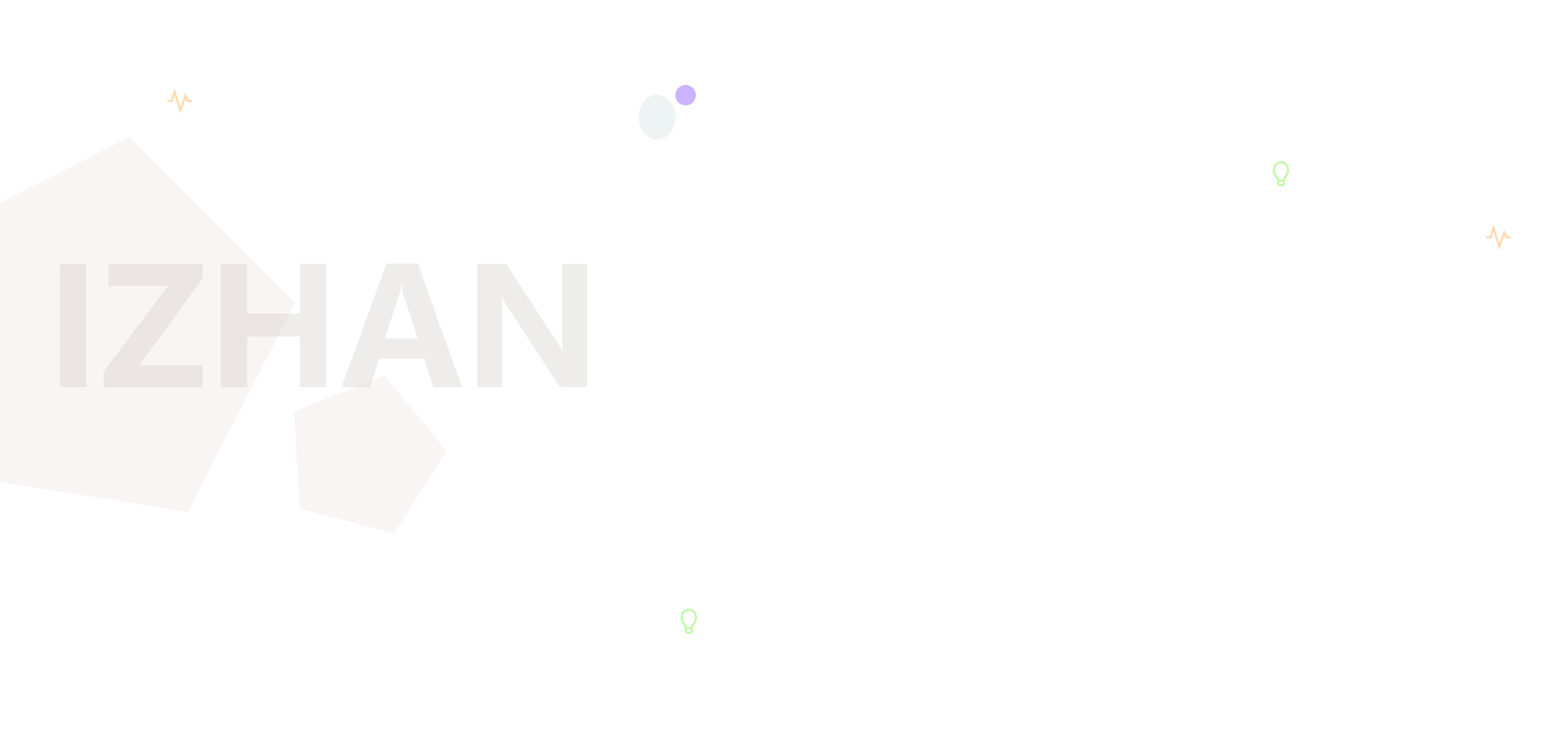
<style>
.page{position:relative;width:1568px;height:735px;background:#ffffff}
.page>*{position:absolute;margin:0}
.t1{font:163.3px "MicrosoftYaHeiUI-Bold";color:#efecec}
</style>
<div class="page">
<p class="t1" style="left:60px;top:263px;width:527px;height:124px">IZHAN</p>
</div>
